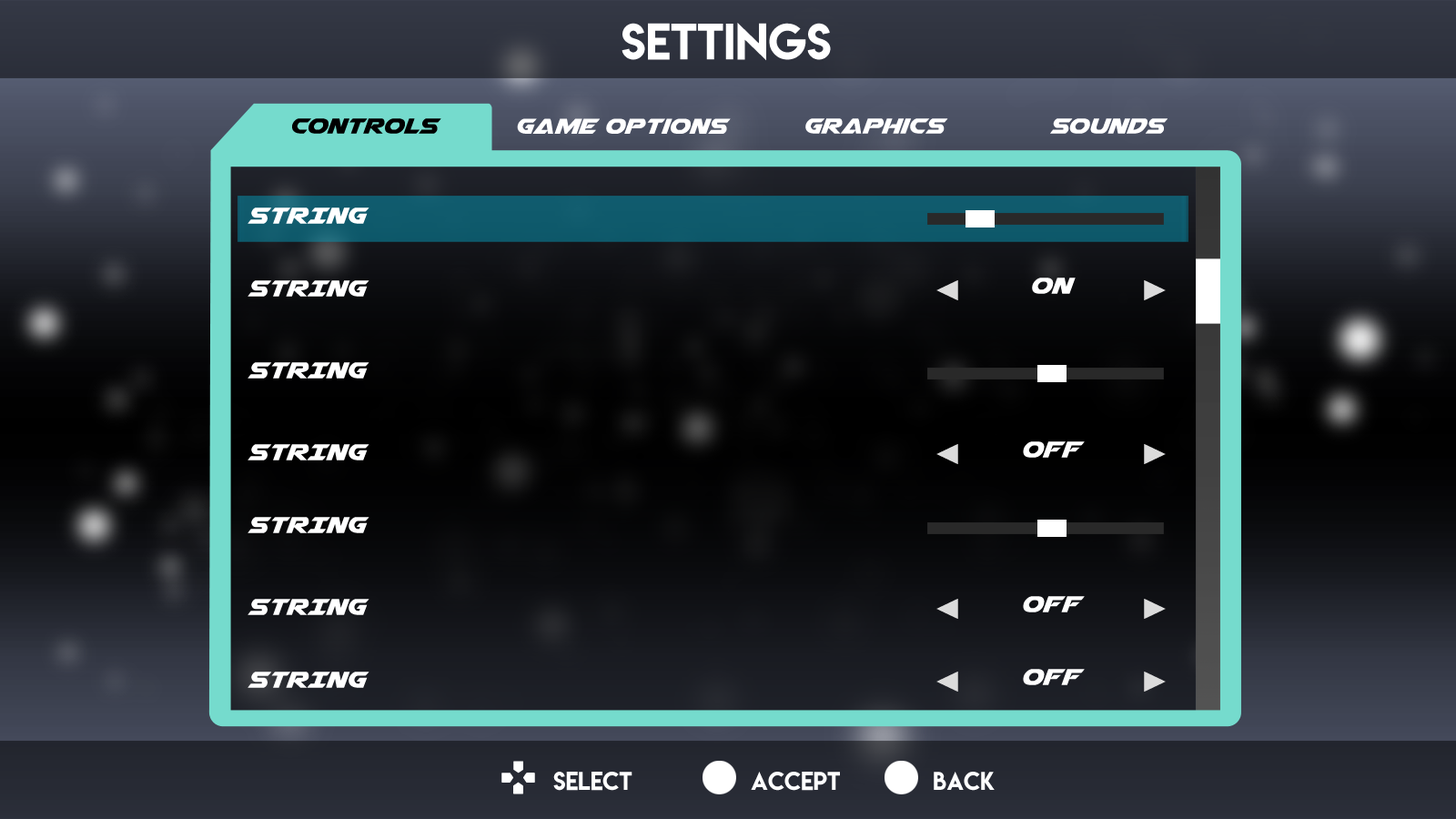
<style>
.page{position:relative;width:1456px;height:819px}
.page>*{position:absolute;margin:0}
.t1{font:45.5px "LemonMilk";color:#ffffff}
.t2{font:28.4px "Airstrike";color:#000000}
.t3{font:28.4px "Airstrike";color:#ffffff}
.t4{font:30.3px "Airstrike";color:#ffffff}
.t5{font:22.7px "LemonMilk";color:#ffffff}
</style>
<div class="page">
<p class="t1" style="left:622px;top:23px;width:209px;height:38px">SETTINGS</p>
<p class="t2" style="left:292px;top:118px;width:149px;height:16px">Controls</p>
<p class="t3" style="left:517px;top:118px;width:214px;height:16px">Game Options</p>
<p class="t3" style="left:805px;top:118px;width:143px;height:16px">Graphics</p>
<p class="t3" style="left:1050px;top:118px;width:118px;height:16px">Sounds</p>
<p class="t4" style="left:248px;top:207px;width:121px;height:17px">STRING</p>
<p class="t4" style="left:248px;top:280px;width:121px;height:17px">STRING</p>
<p class="t4" style="left:1032px;top:278px;width:44px;height:16px">ON</p>
<p class="t4" style="left:248px;top:362px;width:121px;height:17px">STRING</p>
<p class="t4" style="left:248px;top:444px;width:121px;height:16px">STRING</p>
<p class="t4" style="left:1023px;top:441px;width:62px;height:17px">OFF</p>
<p class="t4" style="left:248px;top:517px;width:121px;height:16px">STRING</p>
<p class="t4" style="left:248px;top:599px;width:121px;height:16px">STRING</p>
<p class="t4" style="left:1023px;top:596px;width:62px;height:16px">OFF</p>
<p class="t4" style="left:248px;top:672px;width:121px;height:16px">STRING</p>
<p class="t4" style="left:1023px;top:669px;width:62px;height:16px">OFF</p>
<p class="t5" style="left:553px;top:772px;width:79px;height:19px">SELECT</p>
<p class="t5" style="left:751px;top:772px;width:89px;height:19px">ACCEPT</p>
<p class="t5" style="left:934px;top:772px;width:61px;height:19px">BACK</p>
</div>
